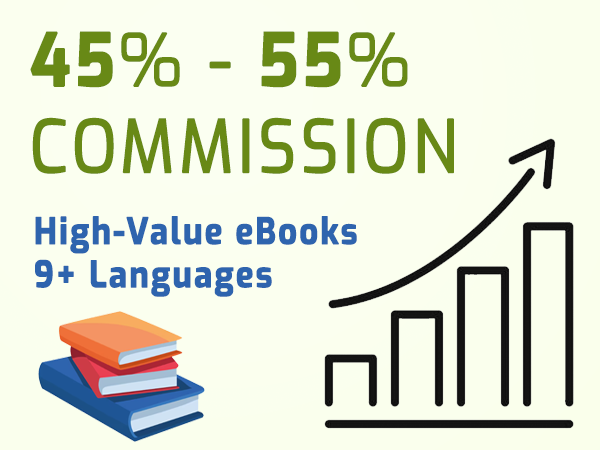
<style>
.page{position:relative;width:600px;height:450px;background:#fbffef}
.page>*{position:absolute;margin:0}
.t1{font:72px "Exo-Regular";letter-spacing:0.05em;color:#688916;font-weight:bold;scale:0.9 1}
.t2{font:72px "Exo-Bold";letter-spacing:0.05em;color:#688916;font-weight:bold;scale:0.9 1}
.t3{font:36px "Exo-Bold";letter-spacing:0.05em;color:#2e64ae;font-weight:bold;scale:0.9 1}
</style>
<div class="page">
<p class="t1" style="left:30px;top:31px;width:424px;height:143px"><span class="t2">45</span>% - <span class="t2">55</span>% COMMISSION</p>
<p class="t3" style="left:35px;top:216px;width:322px;height:81px">High-Value eBooks  <br>9+ Languages</p>
</div>
